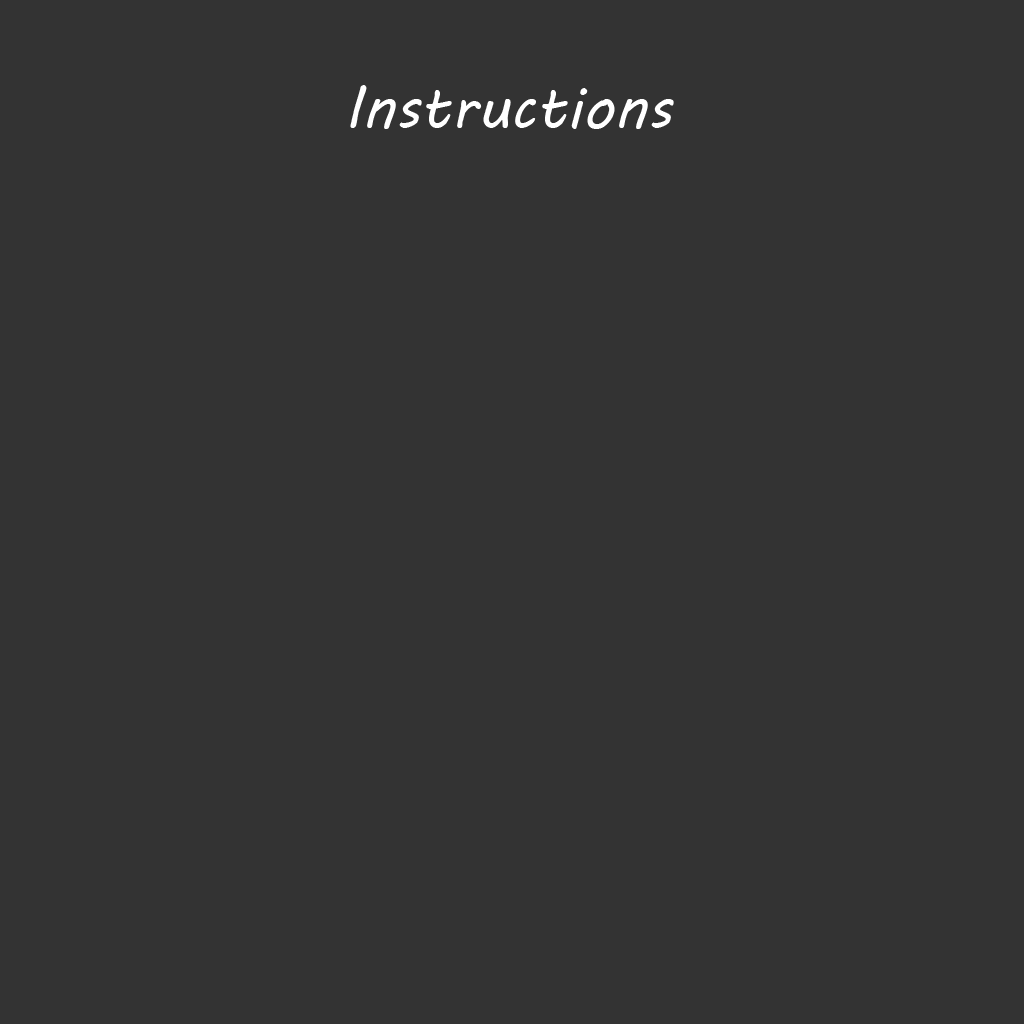
<style>
.page{position:relative;width:1024px;height:1024px;background:#333333}
.page>*{position:absolute;margin:0}
.t1{font:60px "MVBoli";color:#ffffff}
</style>
<div class="page">
<p class="t1" style="left:350px;top:85px;width:324px;height:44px">Instructions</p>
</div>
